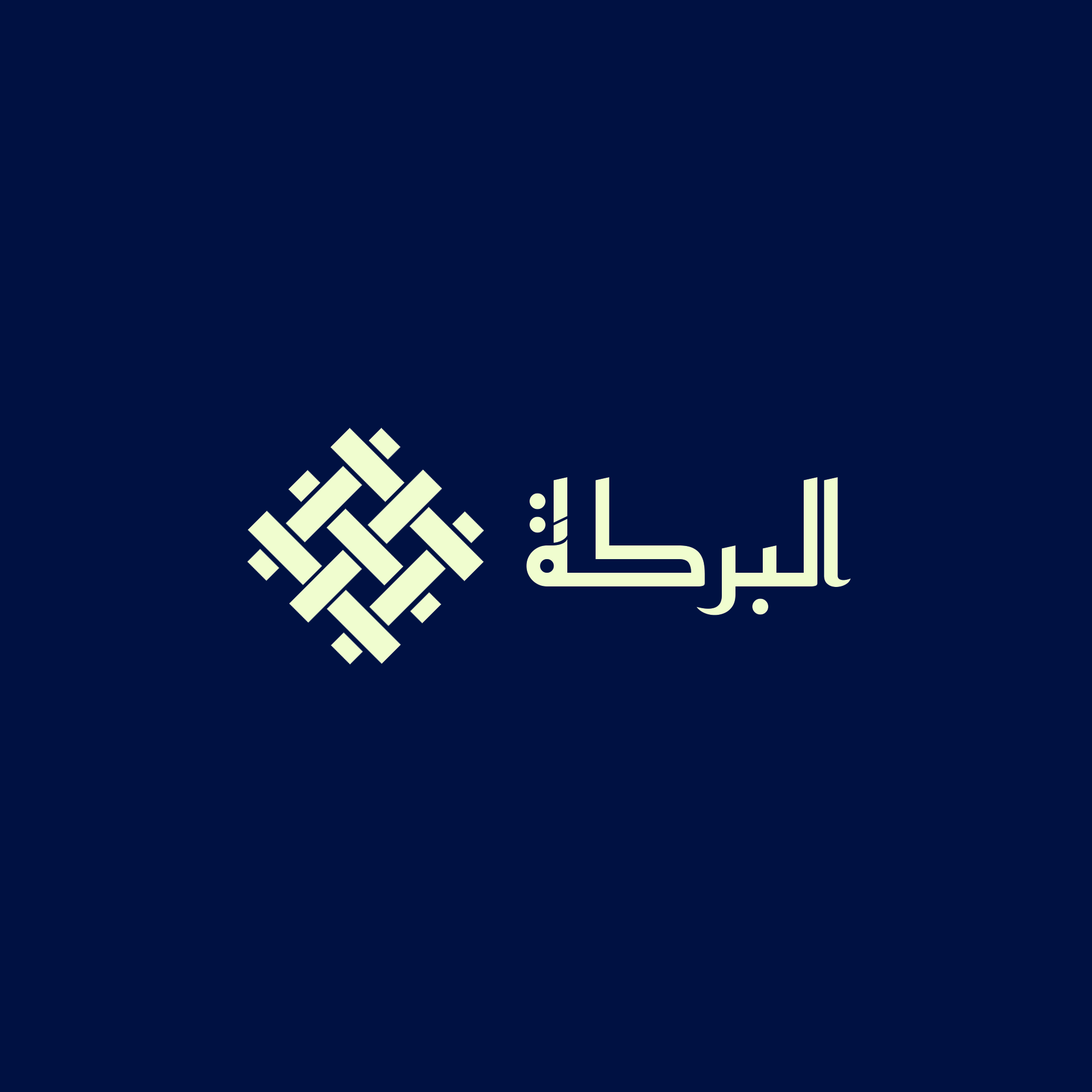
<style>
.page{position:relative;width:1092px;height:1092px;background:#001142}
.page>*{position:absolute;margin:0}
.t1{font:136.5px "ReemKufi";color:#f0fdcf}
</style>
<div class="page">
<p class="t1" style="left:526px;top:477px;width:325px;height:138px">البركة</p>
</div>
